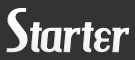
<style>
.page{position:relative;width:135px;height:60px;background:#333333}
.page>*{position:absolute;margin:0}
.t1{font:48px "HamburgerHeaven";color:#ffffff}
.t2{font:60px "HamburgerHeaven";color:#ffffff}
</style>
<div class="page">
<p class="t1" style="left:6px;top:8px;width:124px;height:45px"><span class="t2">S</span>tarter</p>
</div>
